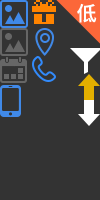
<style>
.page{position:relative;width:100px;height:200px;background:#333333}
.page>*{position:absolute;margin:0}
.t1{font:19.9px "HiraginoSansGB-W6";color:#ffffff}
</style>
<div class="page">
<p class="t1" style="left:77px;top:3px;width:20px;height:20px">低</p>
</div>
